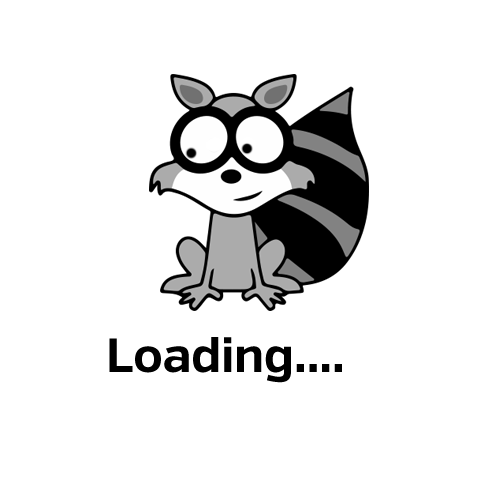
<style>
.page{position:relative;width:500px;height:500px;background:#ffffff}
.page>*{position:absolute;margin:0}
.t1{font:48px "VerbRegular-Bold";color:#000000}
</style>
<div class="page">
<p class="t1" style="left:109px;top:337px;width:233px;height:46px">Loading....</p>
</div>
